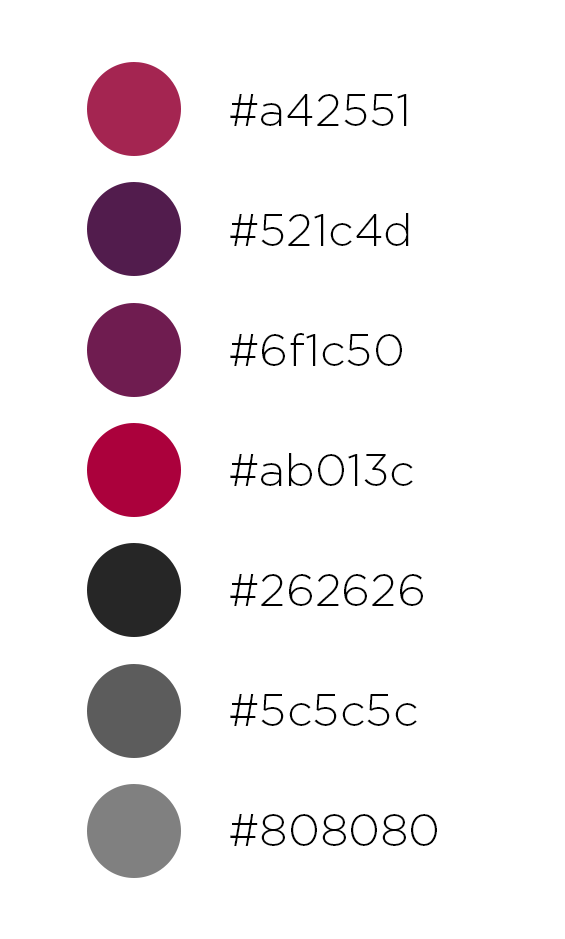
<style>
.page{position:relative;width:565px;height:939px;background:#ffffff}
.page>*{position:absolute;margin:0}
.t1{font:45px/120px "GothamLight";color:#000000}
</style>
<div class="page">
<p class="t1" style="left:230px;top:94px;width:207px;height:752px">#a42551<br>#521c4d<br>#6f1c50<br>#ab013c<br>#262626<br>#5c5c5c<br>#808080</p>
</div>
